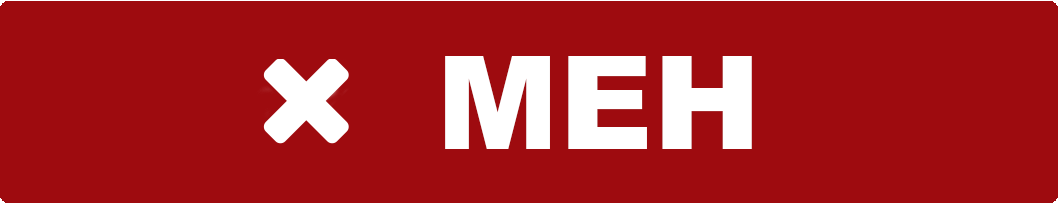
<style>
.page{position:relative;width:1058px;height:205px;background:#9e0b0f}
.page>*{position:absolute;margin:0}
.t1{font:130px "Arial-Black";color:#ffffff}
</style>
<div class="page">
<p class="t1" style="left:445px;top:56px;width:307px;height:93px">MEH</p>
</div>
